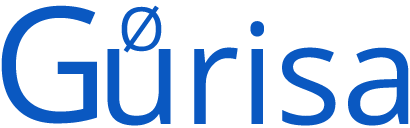
<style>
.page{position:relative;width:410px;height:128px;background:#ffffff}
.page>*{position:absolute;margin:0}
.t1{font:160px "OpenSans";color:#0a58c1}
.t2{font:60px "OpenSans";color:#0a58c1}
.t3{font:140px "OpenSans";color:#0a58c1}
</style>
<div class="page">
<p class="t1" style="left:1px;top:5px;width:96px;height:119px">G</p>
<p class="t2" style="left:121px;top:5px;width:41px;height:48px">Ø</p>
<p class="t3" style="left:107px;top:21px;width:302px;height:105px">urisa</p>
</div>
